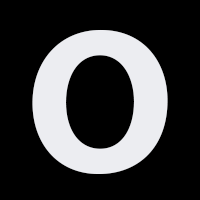
<style>
.page{position:relative;width:200px;height:200px;background:#000000}
.page>*{position:absolute;margin:0}
.t1{font:208.3px "MyriadPro-Bold";color:#ecedf1}
</style>
<div class="page">
<p class="t1" style="left:32px;top:29px;width:136px;height:145px">O</p>
</div>
